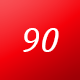
<style>
.page{position:relative;width:80px;height:80px}
.page>*{position:absolute;margin:0}
.t1{font:36px "Cambria-Italic";color:#ffffff}
</style>
<div class="page">
<p class="t1" style="left:23px;top:28px;width:36px;height:24px">90</p>
</div>
